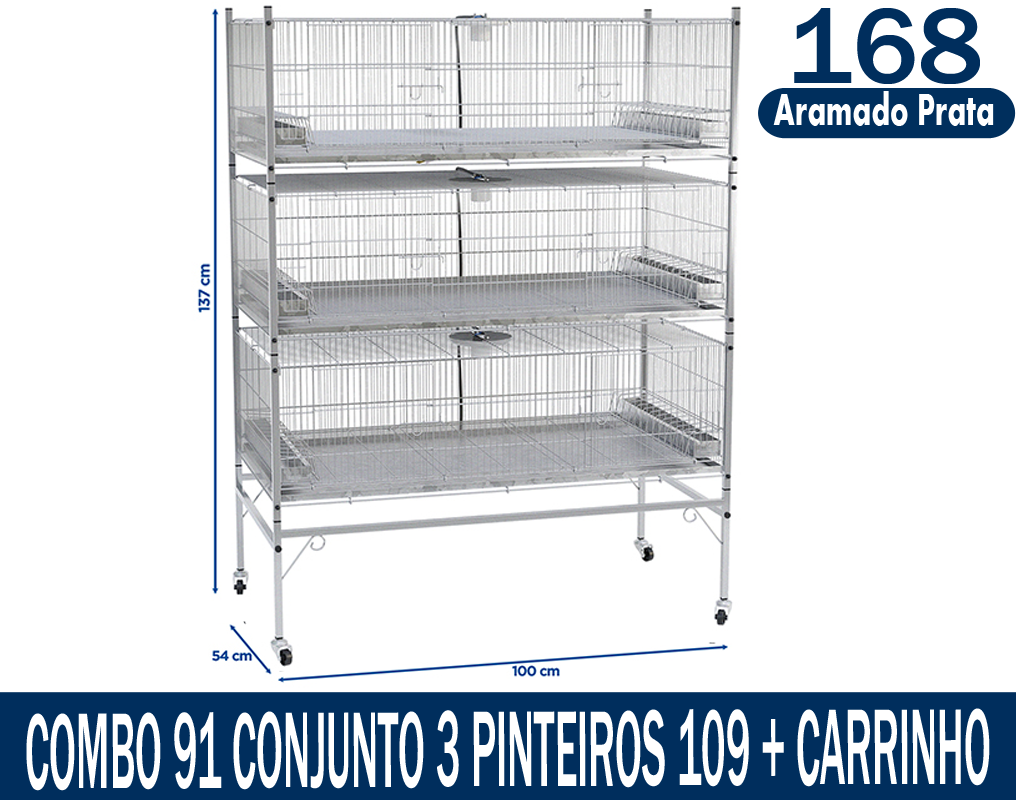
<style>
.page{position:relative;width:1016px;height:800px;background:#ffffff}
.page>*{position:absolute;margin:0}
.t1{font:111.2px "FranklinGothic-Medium";color:#002e5d}
.t2{font:45.9px "Aharoni-Bold";color:#ffffff;scale:0.66 1}
.t3{font:111.2px "FranklinGothic-Medium";color:#ffffff;scale:0.38 1}
</style>
<div class="page">
<p class="t1" style="left:794px;top:8px;width:186px;height:76px">168</p>
<p class="t2" style="left:773px;top:91px;width:221px;height:35px">Aramado Prata</p>
<p class="t3" style="left:26px;top:708px;width:964px;height:83px">COMBO 91 CONJUNTO 3 PINTEIROS 109 + CARRINHO</p>
</div>
